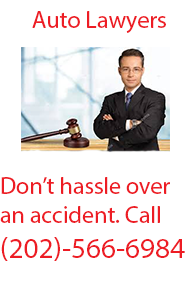
<style>
.page{position:relative;width:192px;height:288px;background:#ffffff}
.page>*{position:absolute;margin:0}
.t1{font:24px "MyriadPro-Regular";color:#ed1c24}
.t2{font:29.3px "MyriadPro-Regular";color:#ed1c24}
</style>
<div class="page">
<p class="t1" style="left:32px;top:11px;width:134px;height:22px">Auto Lawyers</p>
<p class="t1" style="left:0px;top:177px;width:185px;height:84px">Don’t hassle over                           an accident. Call <span class="t2">(202)-566-6984</span></p>
</div>
